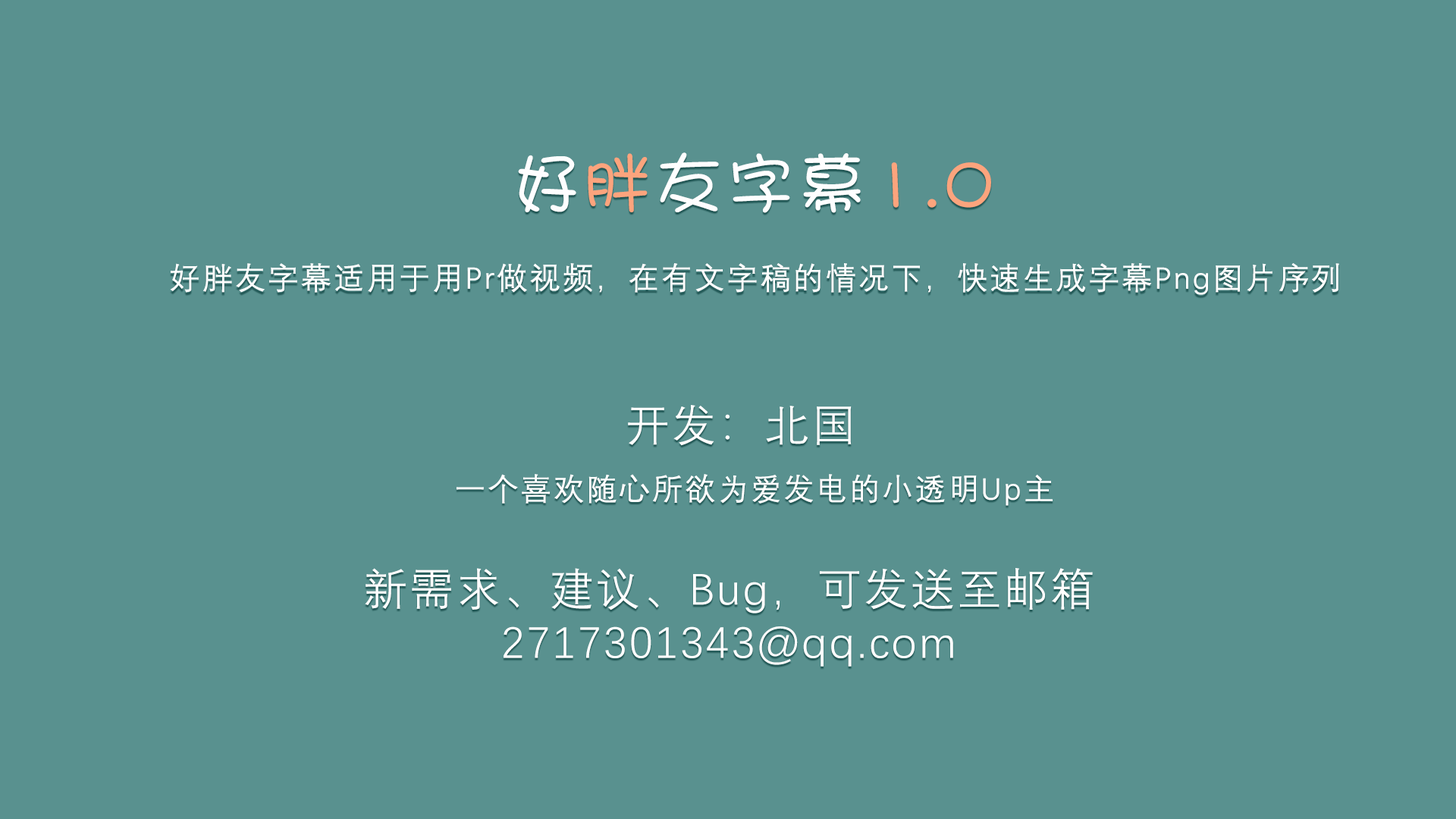
<style>
.page{position:relative;width:1456px;height:819px;background:#59918f}
.page>*{position:absolute;margin:0}
.t1{font:67.9px "DFPShaoNvW5";letter-spacing:0.05em;color:#fefeff}
.t2{font:67.9px "DFPShaoNvW5";letter-spacing:0.05em;color:#fca47d}
.t3{font:30.5px "DengXian";letter-spacing:0.05em;color:#ffffff;font-weight:bold}
.t4{font:44.4px "DengXian";letter-spacing:0.05em;color:#ffffff}
</style>
<div class="page">
<p class="t1" style="left:518px;top:152px;width:473px;height:61px">好<span class="t2">胖</span>友字幕<span class="t2">1.0</span></p>
<p class="t3" style="left:170px;top:263px;width:1169px;height:32px">好胖友字幕适用于用Pr做视频，在有文字稿的情况下，快速生成字幕Png图片序列</p>
<p class="t4" style="left:628px;top:405px;width:224px;height:41px">开发：北国</p>
<p class="t3" style="left:457px;top:474px;width:596px;height:32px">一个喜欢随心所欲为爱发电的小透明Up主</p>
<p class="t4" style="left:365px;top:568px;width:728px;height:99px;text-align:center">新需求、建议、Bug，可发送至邮箱<br>2717301343@qq.com</p>
</div>
